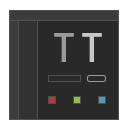
<style>
.page{position:relative;width:128px;height:128px;background:#292929}
.page>*{position:absolute;margin:0}
.t1{font:37px "AdobeHeitiStd-Regular";color:#9a9a9a}
.t2{font:37px "AdobeHeitiStd-Regular";color:#c8c8c8}
</style>
<div class="page">
<p class="t1" style="left:54px;top:33px;width:48px;height:29px">T <span class="t2">T</span></p>
</div>
